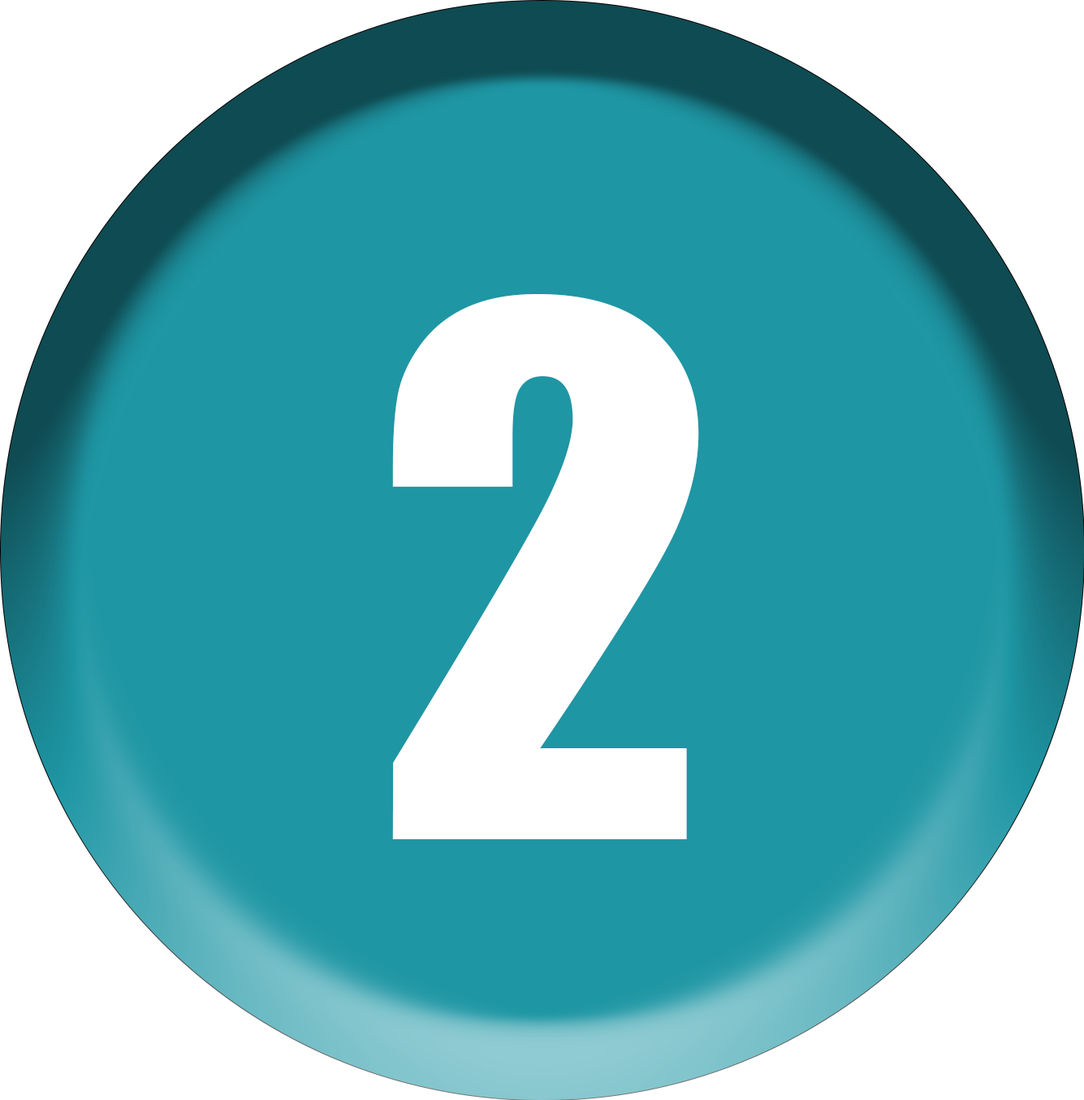
<style>
.page{position:relative;width:1084px;height:1100px;background:#1e96a4}
.page>*{position:absolute;margin:0}
.t1{font:676.8px "Impact";color:#ffffff}
</style>
<div class="page">
<p class="t1" style="left:392px;top:294px;width:307px;height:545px">2</p>
</div>
